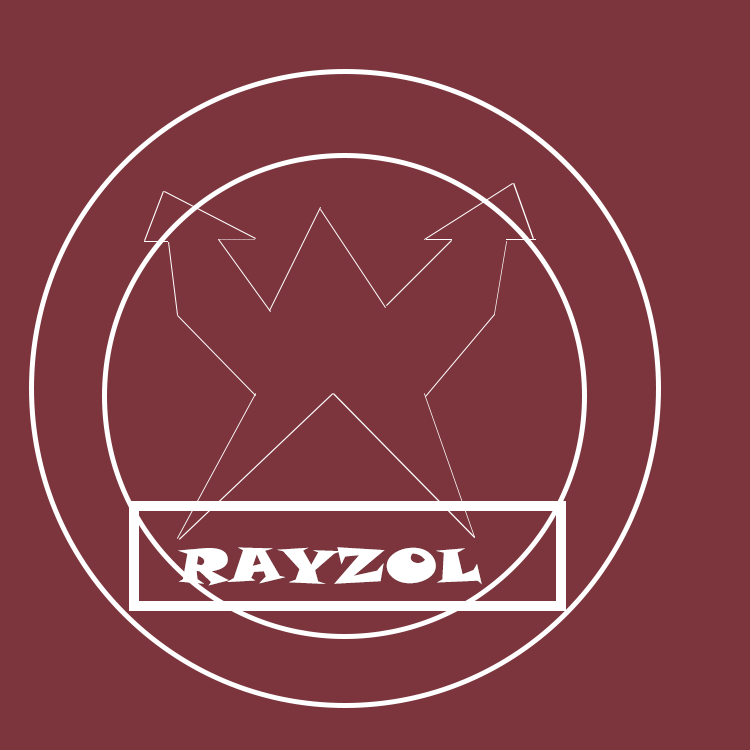
<style>
.page{position:relative;width:750px;height:750px;background:#7c353d}
.page>*{position:absolute;margin:0}
.t1{font:48px "SnapITC-Regular";color:#ffffff;scale:1.29 1}
</style>
<div class="page">
<p class="t1" style="left:178px;top:547px;width:304px;height:39px">RAYZOL</p>
</div>
